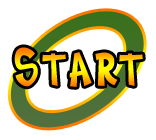
<style>
.page{position:relative;width:156px;height:140px;background:#ffffff}
.page>*{position:absolute;margin:0}
.t1{font:48px "CosmicTwoPlain"}
</style>
<div class="page">
<p class="t1" style="left:14px;top:47px;width:129px;height:40px">Start</p>
</div>
